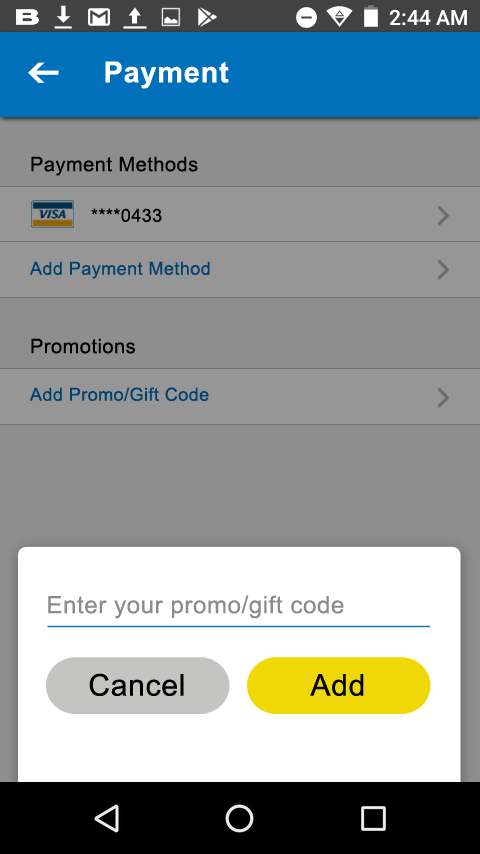
<style>
.page{position:relative;width:480px;height:854px;background:#8e8e8e}
.page>*{position:absolute;margin:0}
.t1{font:29px "Arial-BoldMT";letter-spacing:0.025em;color:#ffffff}
.t2{font:20px "ArialMT";letter-spacing:0.025em;color:#010101}
.t3{font:18px "ArialMT";letter-spacing:0.025em;color:#000000}
.t4{font:18px "ArialMT";letter-spacing:0.025em;color:#00426d}
.t5{font:24px "ArialMT";letter-spacing:0.025em;color:#8c8c8c}
.t6{font:30px "ArialMT";letter-spacing:0.025em;color:#000000}
</style>
<div class="page">
<p class="t1" style="left:105px;top:61px;width:124px;height:28px">Payment</p>
<p class="t2" style="left:31px;top:156px;width:167px;height:20px">Payment Methods</p>
<p class="t3" style="left:91px;top:208px;width:71px;height:14px">****0433</p>
<p class="t4" style="left:29px;top:261px;width:181px;height:18px">Add Payment Method</p>
<p class="t2" style="left:31px;top:338px;width:104px;height:16px">Promotions</p>
<p class="t4" style="left:29px;top:387px;width:180px;height:14px">Add Promo/Gift Code</p>
<p class="t5" style="left:48px;top:595px;width:296px;height:24px">Enter your promo/gift code</p>
<p class="t6" style="left:89px;top:673px;width:95px;height:23px">Cancel</p>
<p class="t6" style="left:310px;top:674px;width:54px;height:22px">Add</p>
</div>
